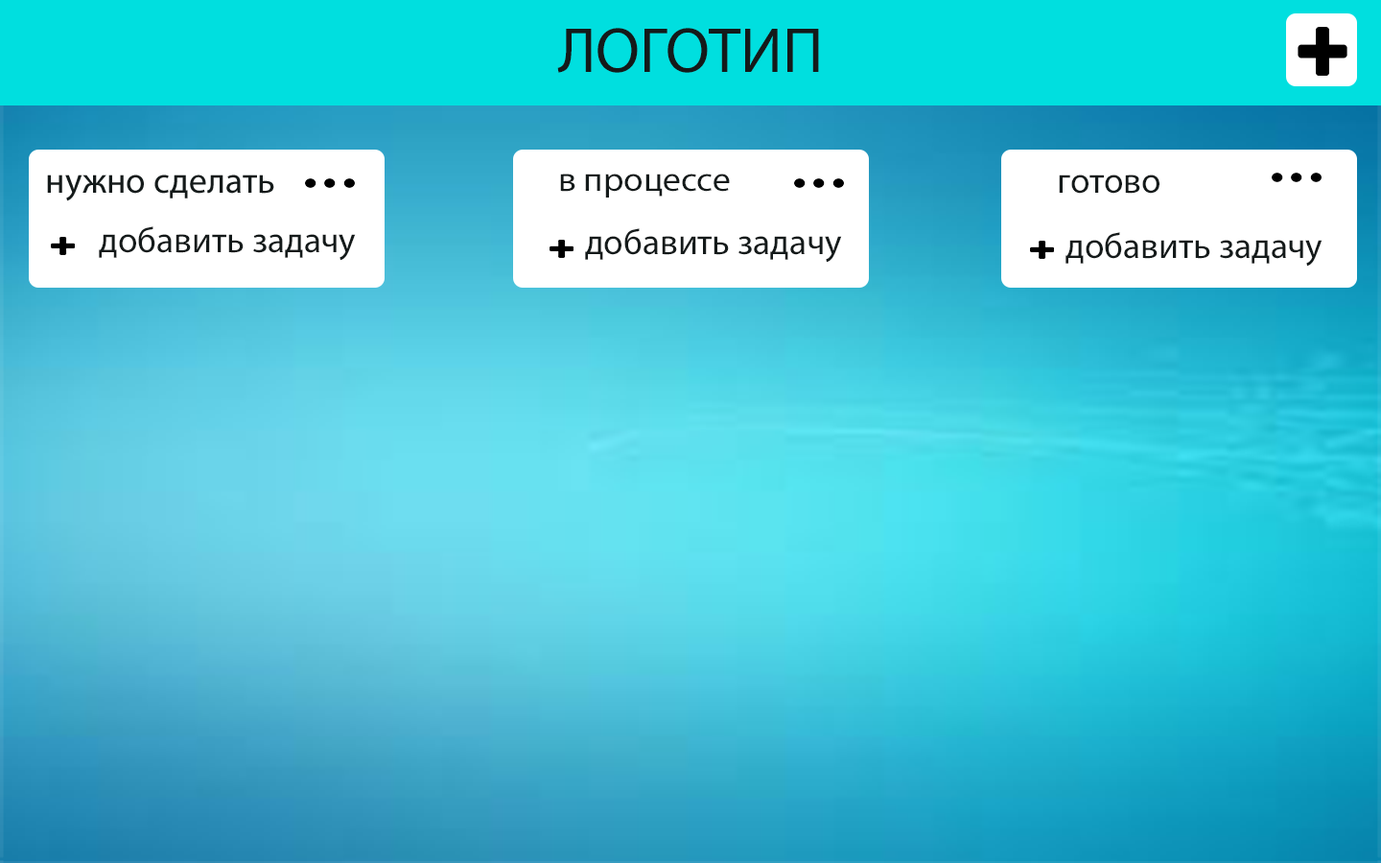
<style>
.page{position:relative;width:1381px;height:863px}
.page>*{position:absolute;margin:0}
.t1{font:63.9px "MyriadPro-Regular";color:#141a1a}
.t2{font:34px "MyriadPro-Regular";color:#141a1a;scale:1.06 1}
.t3{font:36px "MyriadPro-Regular";color:#141a1a}
</style>
<div class="page">
<p class="t1" style="left:557px;top:28px;width:262px;height:45px">ЛОГОТИП</p>
<p class="t2" style="left:560px;top:174px;width:170px;height:24px">в процессе</p>
<p class="t3" style="left:1059px;top:175px;width:101px;height:19px">готово</p>
<p class="t3" style="left:99px;top:226px;width:257px;height:35px">добавить задачу</p>
<p class="t3" style="left:585px;top:228px;width:257px;height:35px">добавить задачу</p>
<p class="t3" style="left:1066px;top:232px;width:257px;height:35px">добавить задачу</p>
</div>
